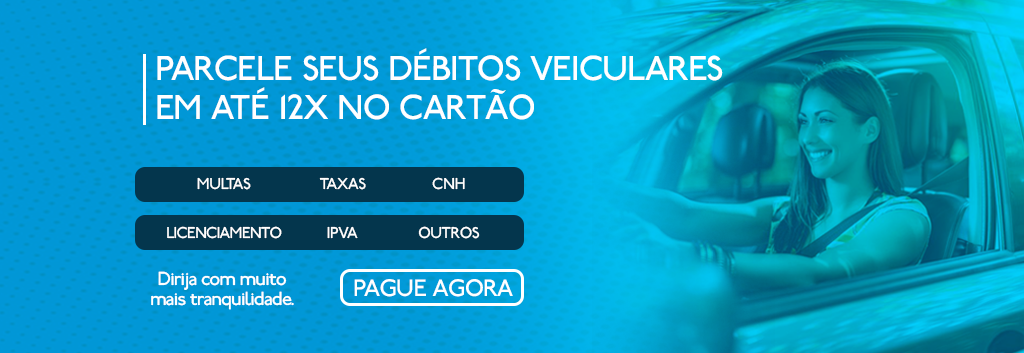
<style>
.page{position:relative;width:1024px;height:353px}
.page>*{position:absolute;margin:0}
.t1{font:36.5px "P22Underground";letter-spacing:-0.025em;color:#ffffff}
.t2{font:16.5px "P22Underground";letter-spacing:-0.025em;color:#ffffff}
.t3{font:16.5px "P22Underground";letter-spacing:-0.05em;color:#ffffff}
.t4{font:20px/20px "P22Underground";letter-spacing:-0.05em;color:#ffffff}
.t5{font:25px "P22Underground";letter-spacing:-0.025em;color:#ffffff}
</style>
<div class="page">
<p class="t1" style="left:157px;top:48px;width:566px;height:33px">PARCELE SEUS DÉBITOS VEICULARES</p>
<p class="t1" style="left:157px;top:87px;width:377px;height:33px">EM ATÉ 12X NO CARTÃO</p>
<p class="t2" style="left:197px;top:177px;width:54px;height:13px">MULTAS</p>
<p class="t2" style="left:319px;top:177px;width:47px;height:13px">TAXAS</p>
<p class="t2" style="left:432px;top:177px;width:33px;height:13px">CNH</p>
<p class="t3" style="left:167px;top:226px;width:115px;height:13px">LICENCIAMENTO</p>
<p class="t2" style="left:327px;top:226px;width:31px;height:13px">IPVA</p>
<p class="t2" style="left:418px;top:226px;width:62px;height:13px">OUTROS</p>
<p class="t4" style="left:151px;top:271px;width:143px;height:39px;text-align:center">Dirija com muito<br>mais tranquilidade.</p>
<p class="t5" style="left:354px;top:279px;width:159px;height:18px">PAGUE AGORA</p>
</div>
